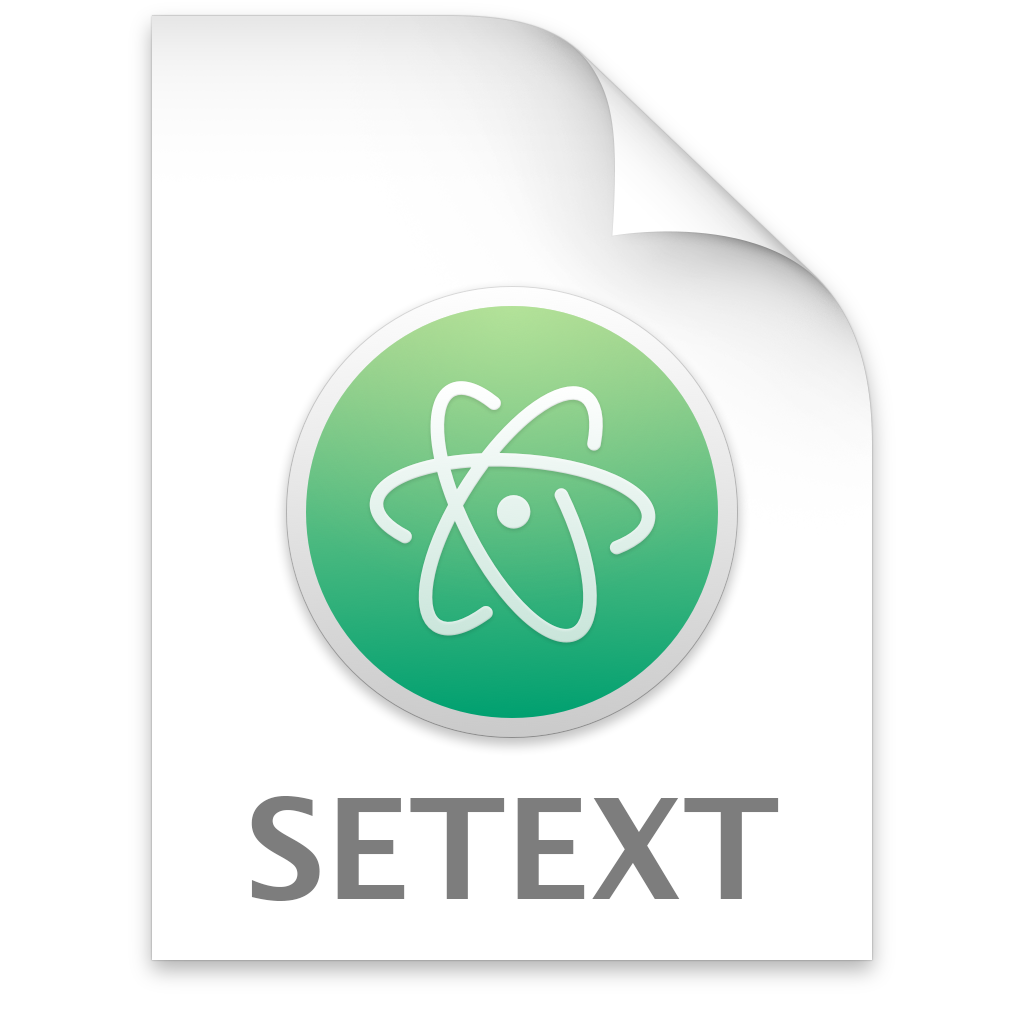
<style>
.page{position:relative;width:1024px;height:1024px;background:#ffffff}
.page>*{position:absolute;margin:0}
.t1{font:140px "LucidaGrande-Bold";color:#7d7d7d}
</style>
<div class="page">
<p class="t1" style="left:251px;top:796px;width:528px;height:105px">SETEXT</p>
</div>
